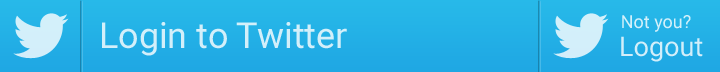
<style>
.page{position:relative;width:720px;height:72px}
.page>*{position:absolute;margin:0}
.t1{font:18px "Roboto-Regular";color:#d3f0fa}
.t2{font:36px "Roboto-Regular";color:#d3effa}
.t3{font:27px "Roboto-Regular";color:#d3eefa}
</style>
<div class="page">
<p class="t1" style="left:622px;top:15px;width:69px;height:17px">Not you?</p>
<p class="t2" style="left:102px;top:22px;width:245px;height:34px">Login to Twitter</p>
<p class="t3" style="left:621px;top:36px;width:82px;height:26px">Logout</p>
</div>
